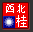
<style>
.page{position:relative;width:33px;height:32px;background:#f20000}
.page>*{position:absolute;margin:0}
.t1{font:10.4px "SimSun";color:#ffffff}
.t2{font:11.7px "SimSun";color:#ffffff}
</style>
<div class="page">
<p class="t1" style="left:6px;top:4px;width:19px;height:9px">西北</p>
<p class="t2" style="left:16px;top:15px;width:11px;height:12px">桂</p>
</div>
